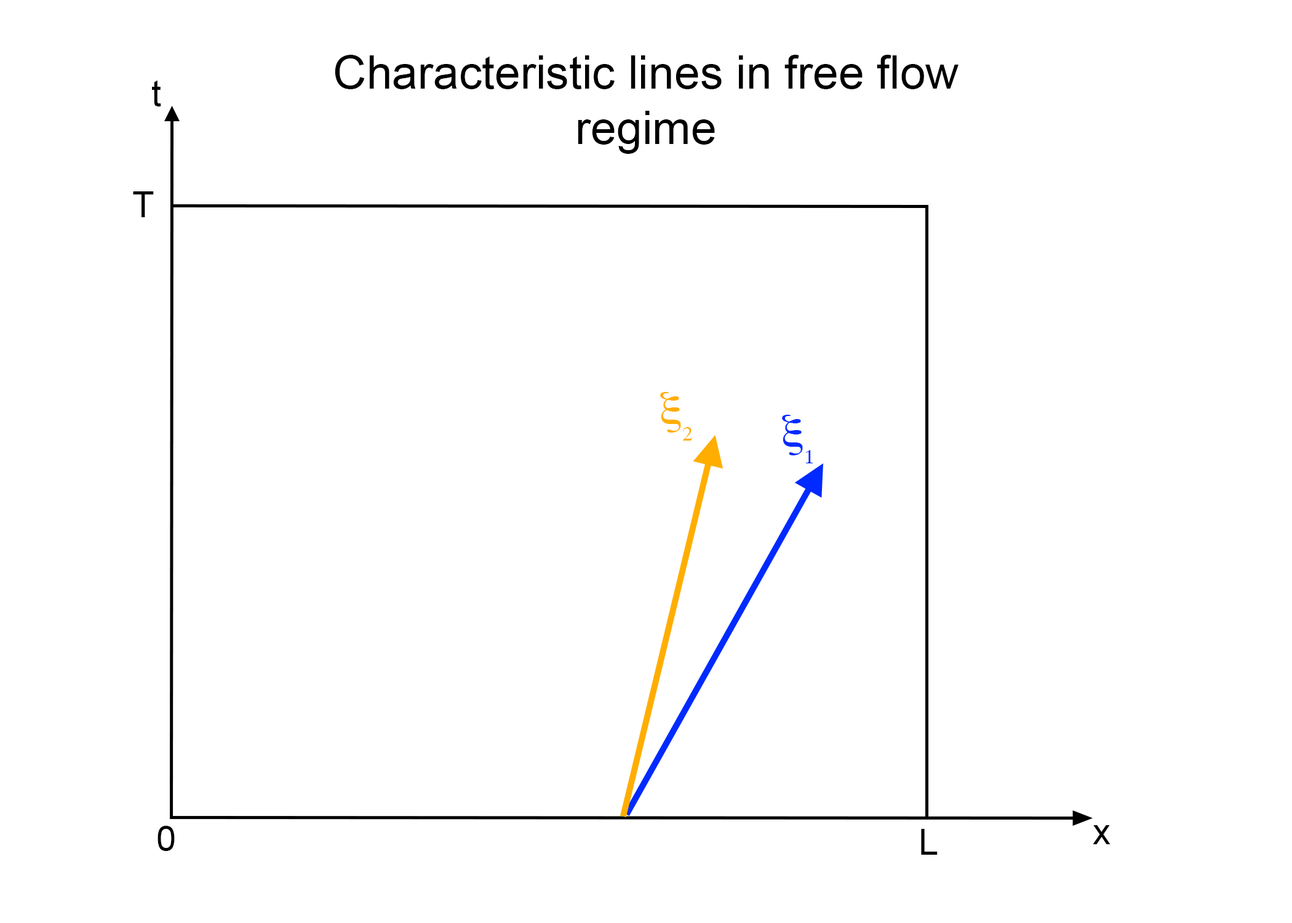
<style>
.page{position:relative;width:1292px;height:923px;background:#ffffff}
.page>*{position:absolute;margin:0}
.t1{font:46.1px "ArialMT";color:#000000}
.t2{font:35.9px "ArialMT";color:#000000}
</style>
<div class="page">
<p class="t1" style="left:335px;top:55px;width:624px;height:99px;text-align:center">Characteristic lines in free flow regime</p>
<p class="t2" style="left:152px;top:80px;width:9px;height:26px">t</p>
<p class="t2" style="left:133px;top:191px;width:21px;height:26px">T</p>
<p class="t2" style="left:158px;top:826px;width:17px;height:25px">0</p>
<p class="t2" style="left:921px;top:829px;width:17px;height:26px">L</p>
<p class="t2" style="left:1093px;top:825px;width:18px;height:19px">x</p>
</div>
